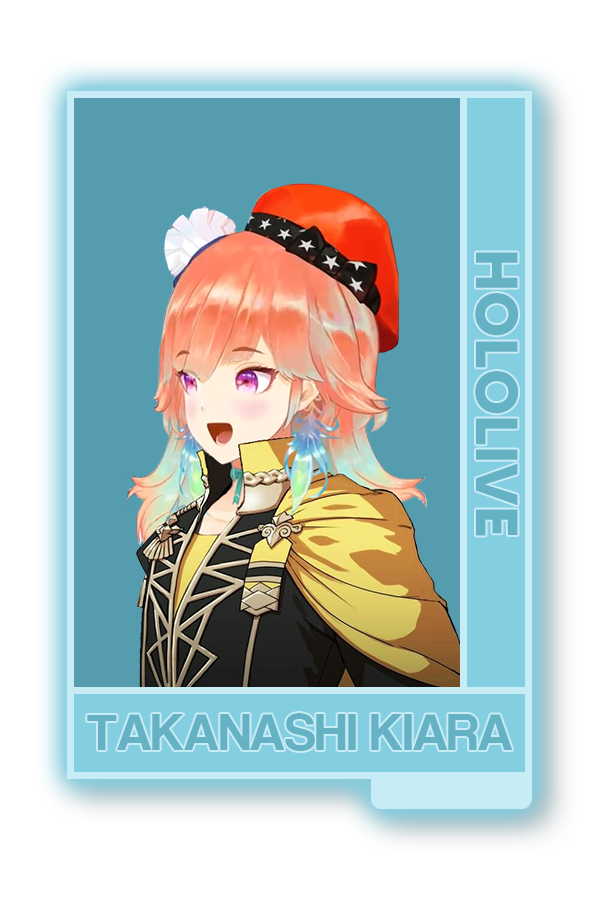
<style>
.page{position:relative;width:600px;height:900px;background:#ffffff}
.page>*{position:absolute;margin:0}
.t1{font:59.2px "MADETOMMY-Bold";color:#66b2c5}
.t2{font:53.9px "CoolveticaRg-Regular";color:#66b2c5}
</style>
<div class="page">
<p class="t1" style="left:475px;top:252px;width:44px;height:284px;rotate:90deg">HOLOLIVE</p>
<p class="t2" style="left:87px;top:713px;width:426px;height:38px">TAKANASHI KIARA</p>
</div>
